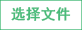
<style>
.page{position:relative;width:82px;height:30px;background:#ffffff}
.page>*{position:absolute;margin:0}
.t1{font:14.4px "SimHei";letter-spacing:0.02em;color:#49bb7a;font-weight:bold}
</style>
<div class="page">
<p class="t1" style="left:11px;top:7px;width:60px;height:14px">选择文件</p>
</div>
